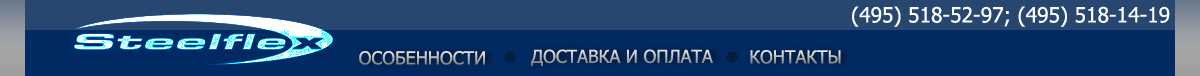
<style>
.page{position:relative;width:1200px;height:76px;background:#012a62}
.page>*{position:absolute;margin:0}
.t1{font:21px "Tahoma";color:#ffffff}
.t2{font:18px "Tahoma"}
.t3{font:18px "Tahoma";text-transform:uppercase}
</style>
<div class="page">
<p class="t1" style="left:852px;top:6px;width:318px;height:21px">(495) 518-52-97; (495) 518-14-19</p>
<p class="t2" style="left:359px;top:51px;width:126px;height:14px">ОСОБЕННОСТИ</p>
<p class="t3" style="left:531px;top:49px;width:182px;height:17px">доставка и оплата</p>
<p class="t3" style="left:750px;top:50px;width:91px;height:14px">контакты</p>
</div>
